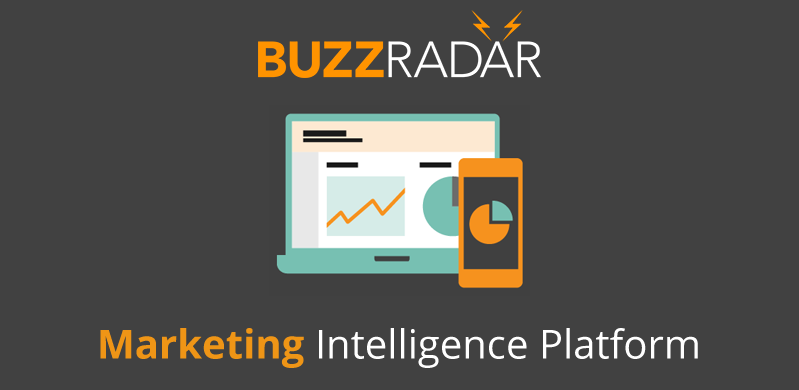
<style>
.page{position:relative;width:799px;height:390px;background:#414141}
.page>*{position:absolute;margin:0}
.t1{font:40.1px "OpenSans";color:#ffffff}
.t2{font:40.1px "OpenSans-Bold";color:#ef9516}
</style>
<div class="page">
<p class="t1" style="left:100px;top:328px;width:598px;height:40px"><span class="t2">Marketing </span>Intelligence Platform</p>
</div>
